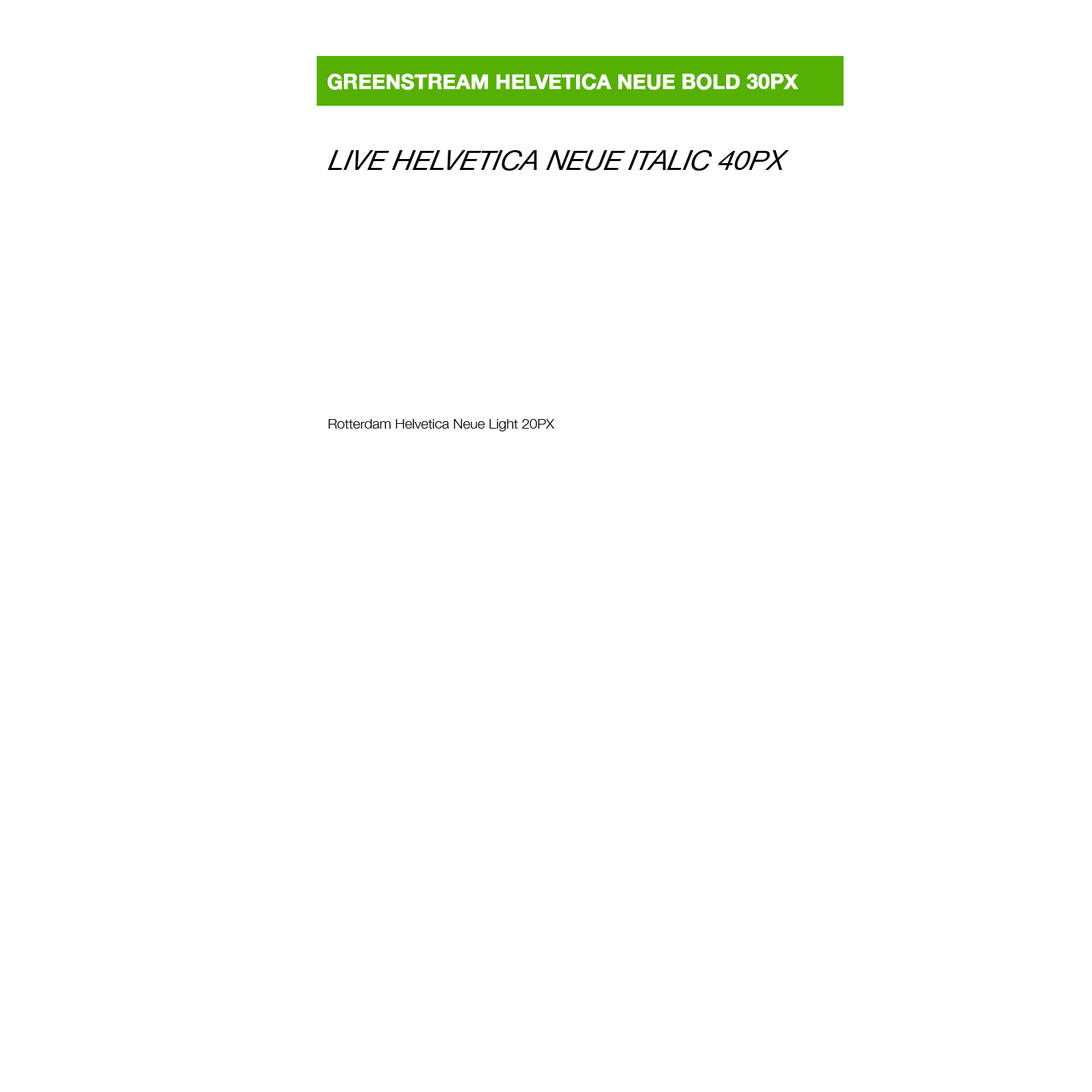
<style>
.page{position:relative;width:1092px;height:1092px;background:#ffffff}
.page>*{position:absolute;margin:0}
.t1{font:20.5px "HelveticaNeue-Bold";letter-spacing:-0.01em;color:#ffffff;text-transform:uppercase;font-weight:bold}
.t2{font:27.3px "HelveticaNeue-Italic";letter-spacing:-0.01em;color:#000000;text-transform:uppercase;font-style:italic;scale:1.04 1}
.t3{font:13.7px "HelveticaNeue-Light";letter-spacing:-0.01em;color:#000000;scale:1.04 1}
</style>
<div class="page">
<p class="t1" style="left:328px;top:74px;width:471px;height:16px">Greenstream helvetica neue Bold 30px</p>
<p class="t2" style="left:328px;top:150px;width:461px;height:21px">LIVE Helvetica neue italic 40px</p>
<p class="t3" style="left:328px;top:419px;width:227px;height:12px">Rotterdam Helvetica Neue Light 20PX</p>
</div>
